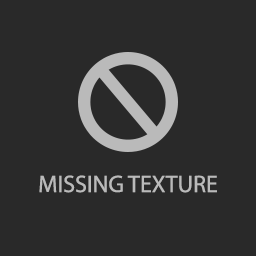
<style>
.page{position:relative;width:256px;height:256px;background:#292929}
.page>*{position:absolute;margin:0}
.t1{font:24px "MyriadPro-Regular";color:#bababa}
</style>
<div class="page">
<p class="t1" style="left:39px;top:175px;width:178px;height:18px">MISSING TEXTURE</p>
</div>
